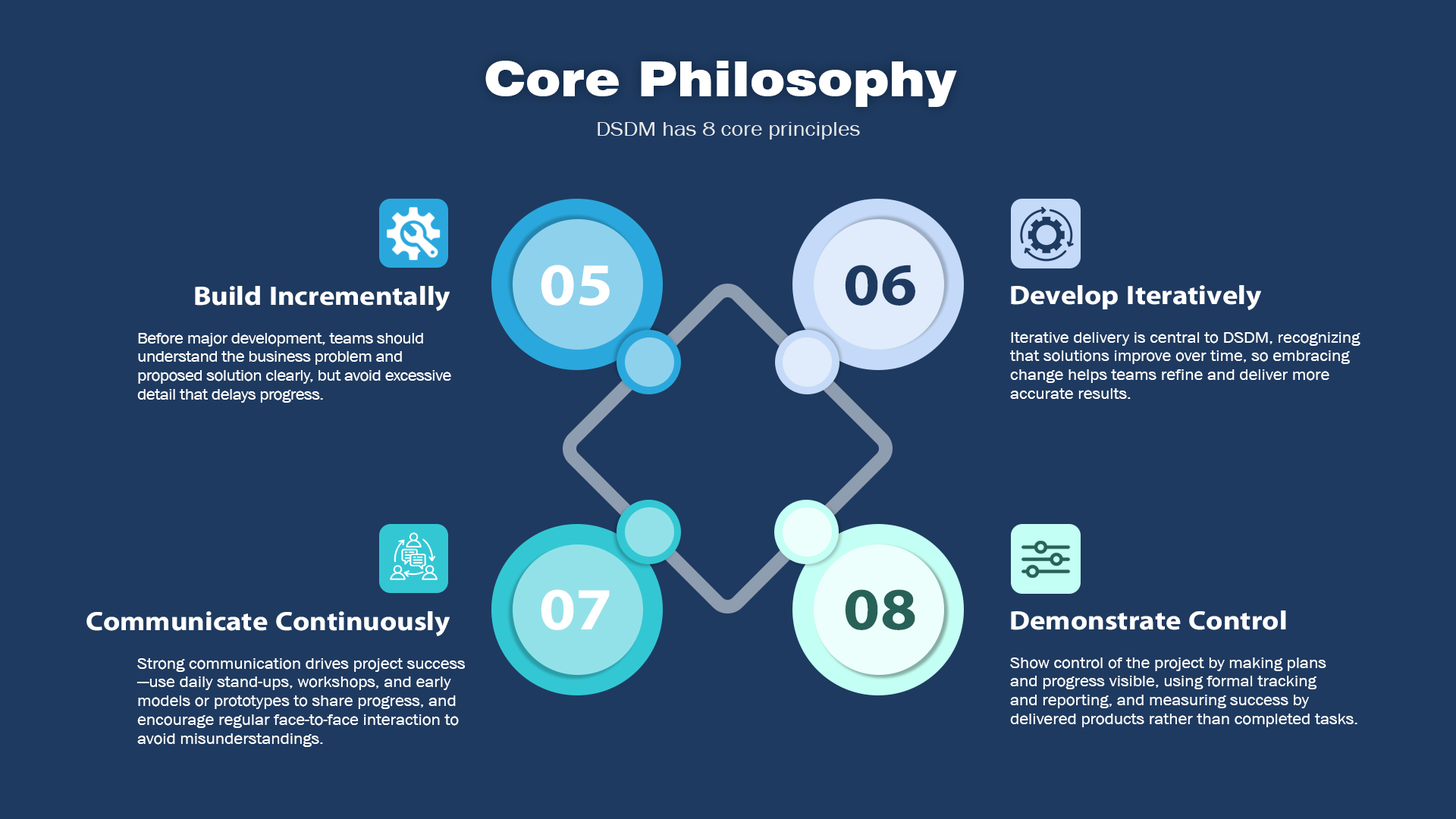
<style>
.page{position:relative;width:1456px;height:819px;background:#1e3a60}
.page>*{position:absolute;margin:0}
.t1{font:48.5px "Swiss721BT-Black";color:#ffffff;scale:1.1 1}
.t2{font:20.5px "AA-Khmer-AngDaunPov";color:#ffffff;scale:1.1 1}
.t3{font:60.2px "iKampuchea001_O'Chrov";color:#ffffff;scale:1.1 1}
.t4{font:60px "iKampuchea001_O'Chrov";color:#1e3a60;scale:1.1 1}
.t5{font:26.8px "iKampuchea001_O'Chrov";color:#ffffff;scale:1.1 1}
.t6{font:15.7px "AA-Khmer-AngDaunPov";letter-spacing:-0.019em;color:#ffffff;scale:1.1 1}
.t7{font:15.7px "AA-Khmer-AngDaunPov";color:#ffffff;scale:1.1 1}
.t8{font:60px "iKampuchea001_O'Chrov";color:#ffffff;scale:1.1 1}
.t9{font:60px "iKampuchea001_O'Chrov";color:#276157;scale:1.1 1}
</style>
<div class="page">
<p class="t1" style="left:485px;top:61px;width:472px;height:46px">Core Philosophy</p>
<p class="t2" style="left:598px;top:122px;width:262px;height:18px;opacity:0.86">DSDM has 8 core principles</p>
<p class="t3" style="left:541px;top:265px;width:69px;height:41px">05</p>
<p class="t4" style="left:845px;top:265px;width:70px;height:41px">06</p>
<p class="t5" style="left:195px;top:286px;width:255px;height:25px">Build Incrementally</p>
<p class="t5" style="left:1011px;top:285px;width:250px;height:25px">Develop Iteratively</p>
<p class="t6" style="left:137px;top:333px;width:314px;height:70px">Before major development, teams should <br>understand the business problem and <br>proposed solution clearly, but avoid excessive <br>detail that delays progress.</p>
<p class="t7" style="left:1010px;top:332px;width:350px;height:67px">Iterative delivery is central to DSDM, recognizing <br>that solutions improve over time, so embracing <br>change helps teams refine and deliver more <br>accurate results.</p>
<p class="t8" style="left:541px;top:589px;width:69px;height:41px">07</p>
<p class="t9" style="left:845px;top:589px;width:70px;height:41px">08</p>
<p class="t5" style="left:86px;top:611px;width:364px;height:25px">Communicate Continuously</p>
<p class="t5" style="left:1011px;top:610px;width:275px;height:20px">Demonstrate Control</p>
<p class="t7" style="left:136px;top:658px;width:329px;height:89px">Strong communication drives project success<br>—use daily stand-ups, workshops, and early <br>models or prototypes to share progress, and <br>encourage regular face-to-face interaction to <br>avoid misunderstandings.</p>
<p class="t7" style="left:1010px;top:657px;width:347px;height:70px">Show control of the project by making plans <br>and progress visible, using formal tracking <br>and reporting, and measuring success by <br>delivered products rather than completed tasks.</p>
</div>
